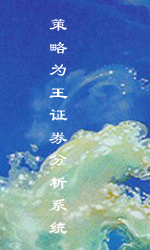
<style>
.page{position:relative;width:150px;height:250px}
.page>*{position:absolute;margin:0}
.t1{font:18.8px "Á¥Êé-Regular";color:#ffffff}
</style>
<div class="page">
<p class="t1" style="left:49px;top:19px;width:19px;height:215px">策<br>略<br>为<br>王<br>证<br>券<br>分<br>析<br>系<br>统</p>
</div>
